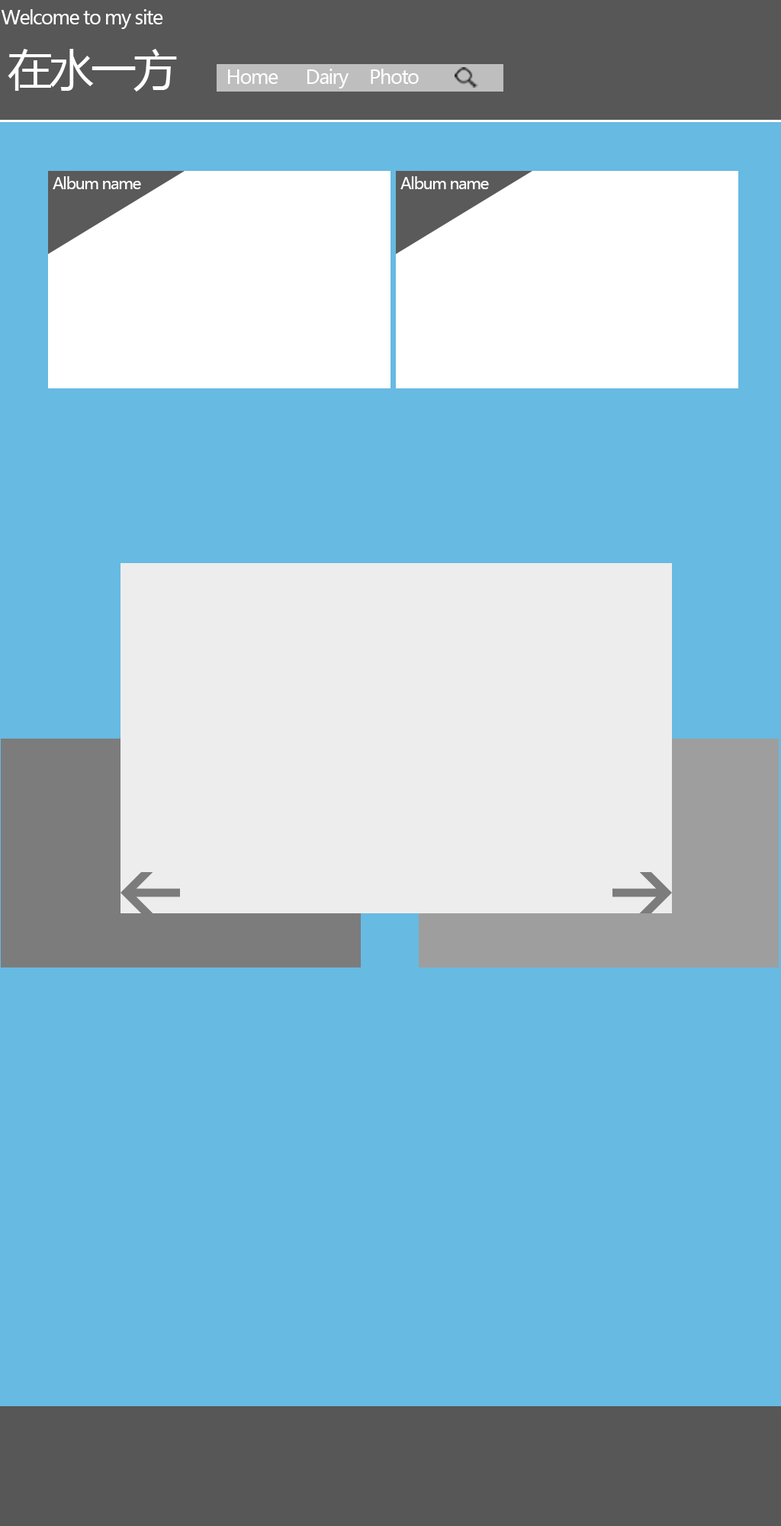
<style>
.page{position:relative;width:781px;height:1526px;background:#67bae2}
.page>*{position:absolute;margin:0}
.t1{font:19.1px "MicrosoftYaHei";letter-spacing:-0.06em;color:#ffffff}
.t2{font:44.5px "MicrosoftYaHei";letter-spacing:-0.06em;color:#ffffff}
.t3{font:15.9px "MicrosoftYaHei";letter-spacing:-0.06em;color:#ffffff}
</style>
<div class="page">
<p class="t1" style="left:1px;top:9px;width:162px;height:20px">Welcome to my site</p>
<p class="t2" style="left:8px;top:49px;width:169px;height:43px">在水一方</p>
<p class="t1" style="left:228px;top:69px;width:51px;height:15px">Home</p>
<p class="t1" style="left:308px;top:69px;width:41px;height:20px">Dairy</p>
<p class="t1" style="left:371px;top:69px;width:48px;height:15px">Photo</p>
<p class="t3" style="left:53px;top:176px;width:88px;height:13px">Album name</p>
<p class="t3" style="left:401px;top:176px;width:88px;height:13px">Album name</p>
</div>
